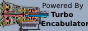
<style>
.page{position:relative;width:88px;height:31px;background:#9dabc0}
.page>*{position:absolute;margin:0}
.t1{font:7.1px "DejaVuSans";color:#000000}
.t2{font:7.1px "DejaVuSans-Bold";color:#000000}
</style>
<div class="page">
<p class="t1" style="left:42px;top:2px;width:42px;height:8px">Powered By</p>
<p class="t2" style="left:41px;top:11px;width:48px;height:16px">Turbo<br>Encabulator</p>
</div>
